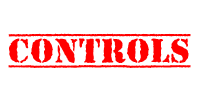
<style>
.page{position:relative;width:200px;height:100px;background:#ffffff}
.page>*{position:absolute;margin:0}
.t1{font:34.9px "TopSecret";color:#ff0000}
</style>
<div class="page">
<p class="t1" style="left:8px;top:33px;width:183px;height:35px">CONTROLS</p>
</div>
